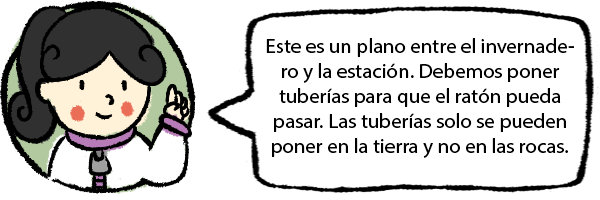
<style>
.page{position:relative;width:600px;height:200px;background:#ffffff}
.page>*{position:absolute;margin:0}
.t1{font:20.8px "MyriadHebrew-Regular";color:#000000}
</style>
<div class="page">
<p class="t1" style="left:266px;top:38px;width:308px;height:120px;text-align:center">Este es un plano entre el invernadero y la estación. Debemos poner tuberías para que el ratón pueda pasar. Las tuberías solo se pueden poner en la tierra y no en las rocas.</p>
</div>
